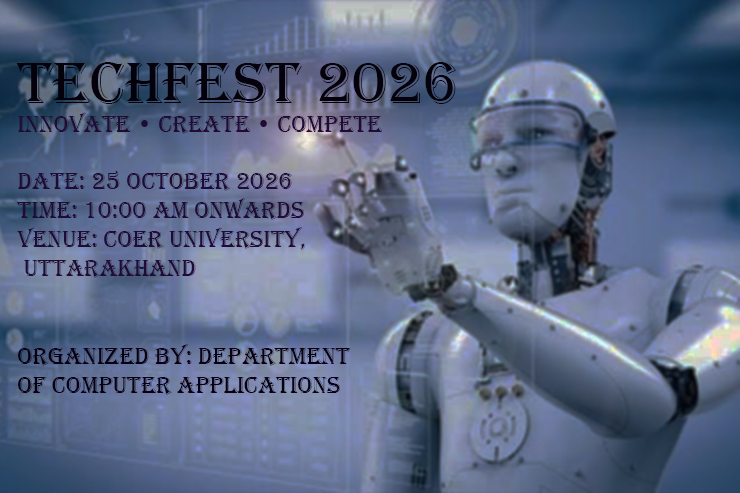
<style>
.page{position:relative;width:740px;height:493px}
.page>*{position:absolute;margin:0}
.t1{font:24px "Algerian";color:#1f0b35}
.t2{font:60px "Algerian";color:#05010a}
.t3{font:24px "Algerian";color:#080011}
</style>
<div class="page">
<p class="t1" style="left:16px;top:62px;width:440px;height:333px"><span class="t2">TECHFEST 2026<br></span>INNOVATE • CREATE • COMPETE<br><br>Date: 25 October 2026  <br>Time: 10:00 AM onwards  <br>Venue: COER University,<br> Uttarakhand<br><br><span class="t3">Organized by: Department <br>of Computer Applications</span></p>
</div>
